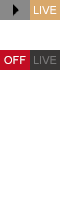
<style>
.page{position:relative;width:60px;height:200px;background:#ffffff}
.page>*{position:absolute;margin:0}
.t1{font:11px "ArialMT";color:#ffffff}
.t2{font:11px "ArialMT";color:#797979}
</style>
<div class="page">
<p class="t1" style="left:34px;top:6px;width:23px;height:8px">LIVE</p>
<p class="t1" style="left:4px;top:56px;width:22px;height:8px">OFF</p>
<p class="t2" style="left:34px;top:56px;width:23px;height:8px">LIVE</p>
</div>
